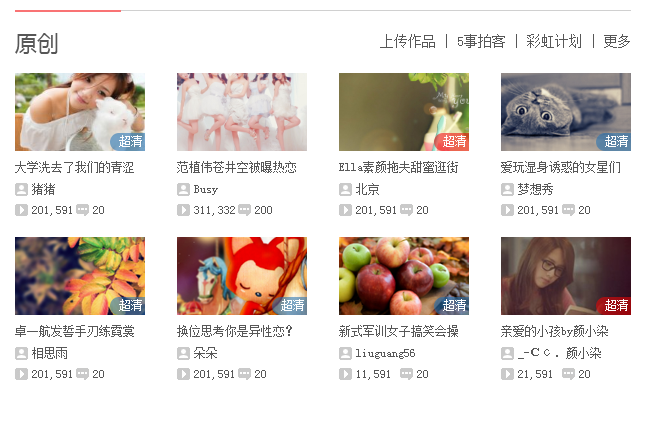
<style>
.page{position:relative;width:647px;height:432px;background:#ffffff}
.page>*{position:absolute;margin:0}
.t1{font:22px "MicrosoftYaHeiUI";color:#575757}
.t2{font:14px "SimSun";color:#575757}
.t3{font:12px "SimSun";color:#ffffff}
.t4{font:12px "SimSun";color:#575757}
</style>
<div class="page">
<p class="t1" style="left:15px;top:33px;width:43px;height:21px">原创</p>
<p class="t2" style="left:380px;top:34px;width:250px;height:14px">上传作品 | 5事拍客 | 彩虹计划 | 更多</p>
<p class="t3" style="left:119px;top:135px;width:23px;height:12px">超清</p>
<p class="t3" style="left:443px;top:135px;width:23px;height:12px">超清</p>
<p class="t3" style="left:605px;top:135px;width:23px;height:12px">超清</p>
<p class="t4" style="left:15px;top:161px;width:119px;height:12px">大学洗去了我们的青涩</p>
<p class="t4" style="left:177px;top:161px;width:119px;height:12px">范植伟苍井空被曝热恋</p>
<p class="t4" style="left:339px;top:161px;width:119px;height:12px">Ella素颜拖夫甜蜜逛街</p>
<p class="t4" style="left:501px;top:161px;width:119px;height:12px">爱玩湿身诱惑的女星们</p>
<p class="t4" style="left:32px;top:183px;width:23px;height:12px">猪猪</p>
<p class="t4" style="left:194px;top:185px;width:24px;height:10px">Busy</p>
<p class="t4" style="left:356px;top:183px;width:23px;height:12px">北京</p>
<p class="t4" style="left:518px;top:183px;width:35px;height:12px">梦想秀</p>
<p class="t4" style="left:32px;top:206px;width:40px;height:10px">201,591</p>
<p class="t4" style="left:93px;top:206px;width:11px;height:8px">20</p>
<p class="t4" style="left:194px;top:206px;width:41px;height:10px">311,332</p>
<p class="t4" style="left:255px;top:206px;width:17px;height:8px">200</p>
<p class="t4" style="left:356px;top:206px;width:40px;height:10px">201,591</p>
<p class="t4" style="left:417px;top:206px;width:11px;height:8px">20</p>
<p class="t4" style="left:518px;top:206px;width:40px;height:10px">201,591</p>
<p class="t4" style="left:579px;top:206px;width:11px;height:8px">20</p>
<p class="t3" style="left:119px;top:299px;width:23px;height:12px">超清</p>
<p class="t3" style="left:281px;top:299px;width:23px;height:12px">超清</p>
<p class="t3" style="left:443px;top:299px;width:23px;height:12px">超清</p>
<p class="t3" style="left:605px;top:299px;width:23px;height:12px">超清</p>
<p class="t4" style="left:15px;top:325px;width:119px;height:12px">卓一航发誓手刃练霓裳</p>
<p class="t4" style="left:177px;top:325px;width:115px;height:12px">换位思考你是异性恋？</p>
<p class="t4" style="left:339px;top:325px;width:119px;height:12px">新式军训女子搞笑会操</p>
<p class="t4" style="left:501px;top:325px;width:107px;height:12px">亲爱的小孩by颜小染</p>
<p class="t4" style="left:32px;top:347px;width:35px;height:12px">相思雨</p>
<p class="t4" style="left:194px;top:347px;width:23px;height:12px">朵朵</p>
<p class="t4" style="left:356px;top:349px;width:59px;height:10px">liuguang56</p>
<p class="t4" style="left:518px;top:347px;width:83px;height:12px">_-Ｃс．颜小染</p>
<p class="t4" style="left:32px;top:370px;width:40px;height:10px">201,591</p>
<p class="t4" style="left:93px;top:370px;width:11px;height:8px">20</p>
<p class="t4" style="left:194px;top:370px;width:40px;height:10px">201,591</p>
<p class="t4" style="left:255px;top:370px;width:11px;height:8px">20</p>
<p class="t4" style="left:357px;top:370px;width:33px;height:10px">11,591</p>
<p class="t4" style="left:417px;top:370px;width:11px;height:8px">20</p>
<p class="t4" style="left:518px;top:370px;width:34px;height:10px">21,591</p>
<p class="t4" style="left:579px;top:370px;width:11px;height:8px">20</p>
</div>
